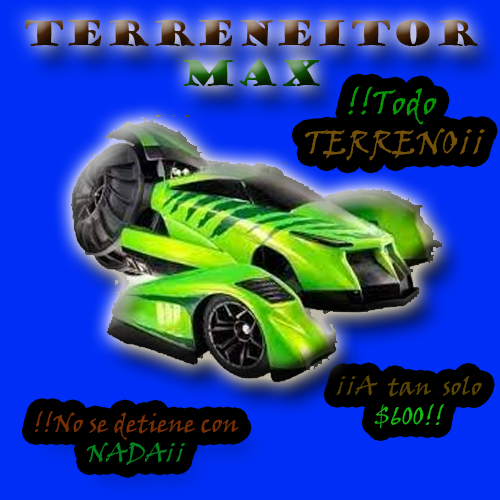
<style>
.page{position:relative;width:500px;height:500px;background:#002ef6}
.page>*{position:absolute;margin:0}
.t1{font:33.3px "GoudyStout"}
.t2{font:33.3px "VinerHandITC";color:#71510c}
.t3{font:33.3px "VinerHandITC";color:#099609}
.t4{font:25px "VinerHandITC";color:#584606}
.t5{font:25px "VinerHandITC";color:#15ba15}
.t6{font:25px "VinerHandITC";color:#753006}
.t7{font:25px "VinerHandITC";color:#058122}
</style>
<div class="page">
<p class="t1" style="left:25px;top:20px;width:453px;height:66px;text-align:center">TERRENEITOR<br>MAX</p>
<p class="t2" style="left:304px;top:86px;width:181px;height:75px;text-align:center"><span class="t3">!!Todo <br></span>TERRENO¡¡</p>
<p class="t4" style="left:336px;top:375px;width:146px;height:54px;text-align:center">¡¡A  tan  solo<br><span class="t5">$600!!</span></p>
<p class="t6" style="left:34px;top:411px;width:205px;height:54px;text-align:center">!!No se detiene con<br><span class="t7">NADA¡¡</span></p>
</div>
